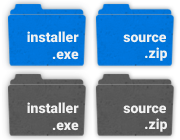
<style>
.page{position:relative;width:180px;height:140px}
.page>*{position:absolute;margin:0}
.t1{font:14px "Roboto-Black";color:#f1f1f1}
.t2{font:12px "Calibri";color:#f1f1f1}
</style>
<div class="page">
<p class="t1" style="left:27px;top:31px;width:52px;height:29px"><span class="t2"><br><br></span>installer<br>.exe</p>
<p class="t1" style="left:123px;top:34px;width:44px;height:27px;text-align:right">source<br>.zip</p>
<p class="t1" style="left:27px;top:102px;width:52px;height:29px"><span class="t2"><br><br></span>installer<br>.exe</p>
<p class="t1" style="left:123px;top:105px;width:44px;height:27px;text-align:right">source<br>.zip</p>
</div>
